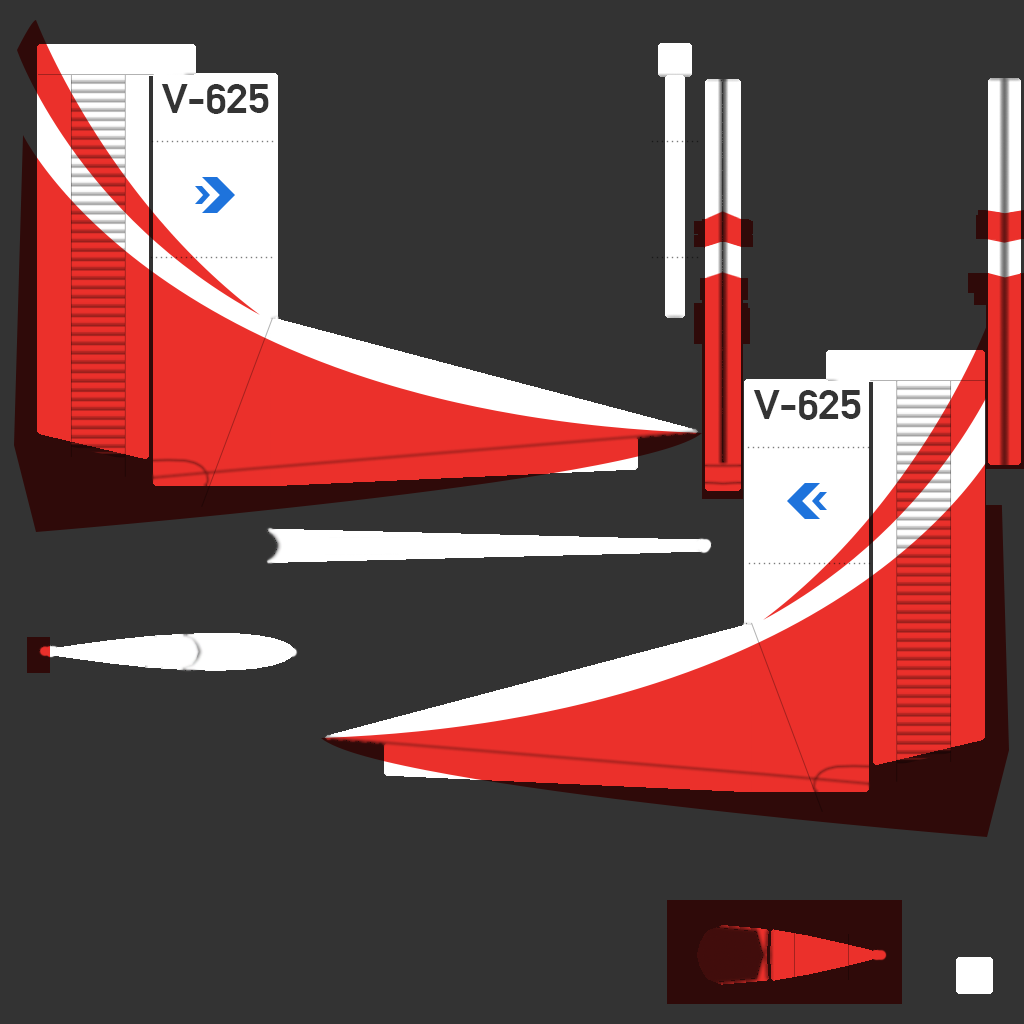
<style>
.page{position:relative;width:1024px;height:1024px;background:#333333}
.page>*{position:absolute;margin:0}
.t1{font:41.2px "AlteDIN1451Mittelschriftgepraegt";letter-spacing:-0.01em;color:#343434;scale:1.11 1}
</style>
<div class="page">
<p class="t1" style="left:161px;top:84px;width:108px;height:30px">V-625</p>
<p class="t1" style="left:753px;top:390px;width:108px;height:30px">V-625</p>
</div>
